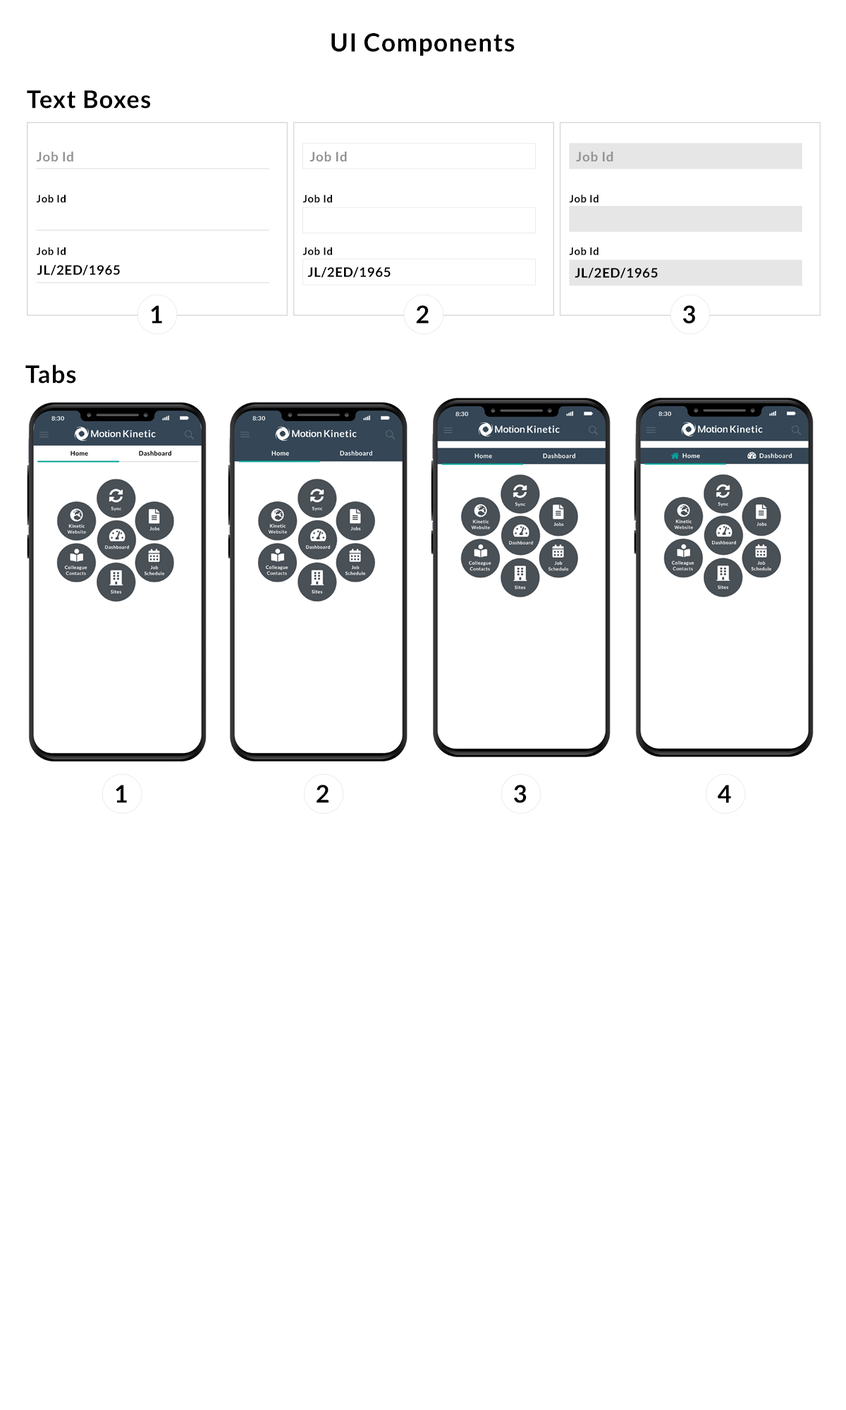
<style>
.page{position:relative;width:846px;height:1410px;background:#ffffff}
.page>*{position:absolute;margin:0}
.t1{font:24.9px "Lato-Bold";letter-spacing:0.04em;color:#000000}
.t2{font:24.1px "Lato-Bold";letter-spacing:0.04em;color:#000000}
.t3{font:13.2px "Lato-Bold";letter-spacing:0.04em;color:#939393}
.t4{font:10.5px "Lato-Bold";letter-spacing:0.04em;color:#000000}
.t5{font:13.2px "Lato-Bold";letter-spacing:0.04em;color:#000000}
</style>
<div class="page">
<p class="t1" style="left:331px;top:33px;width:184px;height:23px">UI Components</p>
<p class="t2" style="left:27px;top:90px;width:123px;height:19px">Text Boxes</p>
<p class="t3" style="left:36px;top:152px;width:37px;height:9px">Job Id</p>
<p class="t3" style="left:309px;top:152px;width:38px;height:9px">Job Id</p>
<p class="t3" style="left:576px;top:152px;width:37px;height:9px">Job Id</p>
<p class="t4" style="left:36px;top:195px;width:30px;height:8px">Job Id</p>
<p class="t4" style="left:302px;top:195px;width:30px;height:8px">Job Id</p>
<p class="t4" style="left:569px;top:195px;width:29px;height:8px">Job Id</p>
<p class="t4" style="left:36px;top:247px;width:30px;height:8px">Job Id</p>
<p class="t4" style="left:302px;top:247px;width:30px;height:8px">Job Id</p>
<p class="t4" style="left:569px;top:247px;width:29px;height:8px">Job Id</p>
<p class="t5" style="left:37px;top:264px;width:83px;height:12px">JL/2ED/1965</p>
<p class="t5" style="left:307px;top:266px;width:84px;height:12px">JL/2ED/1965</p>
<p class="t5" style="left:574px;top:267px;width:84px;height:11px">JL/2ED/1965</p>
<p class="t2" style="left:151px;top:305px;width:11px;height:19px">1</p>
<p class="t2" style="left:416px;top:305px;width:13px;height:19px">2</p>
<p class="t2" style="left:682px;top:305px;width:13px;height:19px">3</p>
<p class="t2" style="left:25px;top:364px;width:51px;height:19px">Tabs</p>
<p class="t2" style="left:116px;top:785px;width:11px;height:18px">1</p>
<p class="t2" style="left:316px;top:785px;width:12px;height:18px">2</p>
<p class="t2" style="left:514px;top:785px;width:13px;height:18px">3</p>
<p class="t2" style="left:718px;top:785px;width:13px;height:18px">4</p>
</div>
